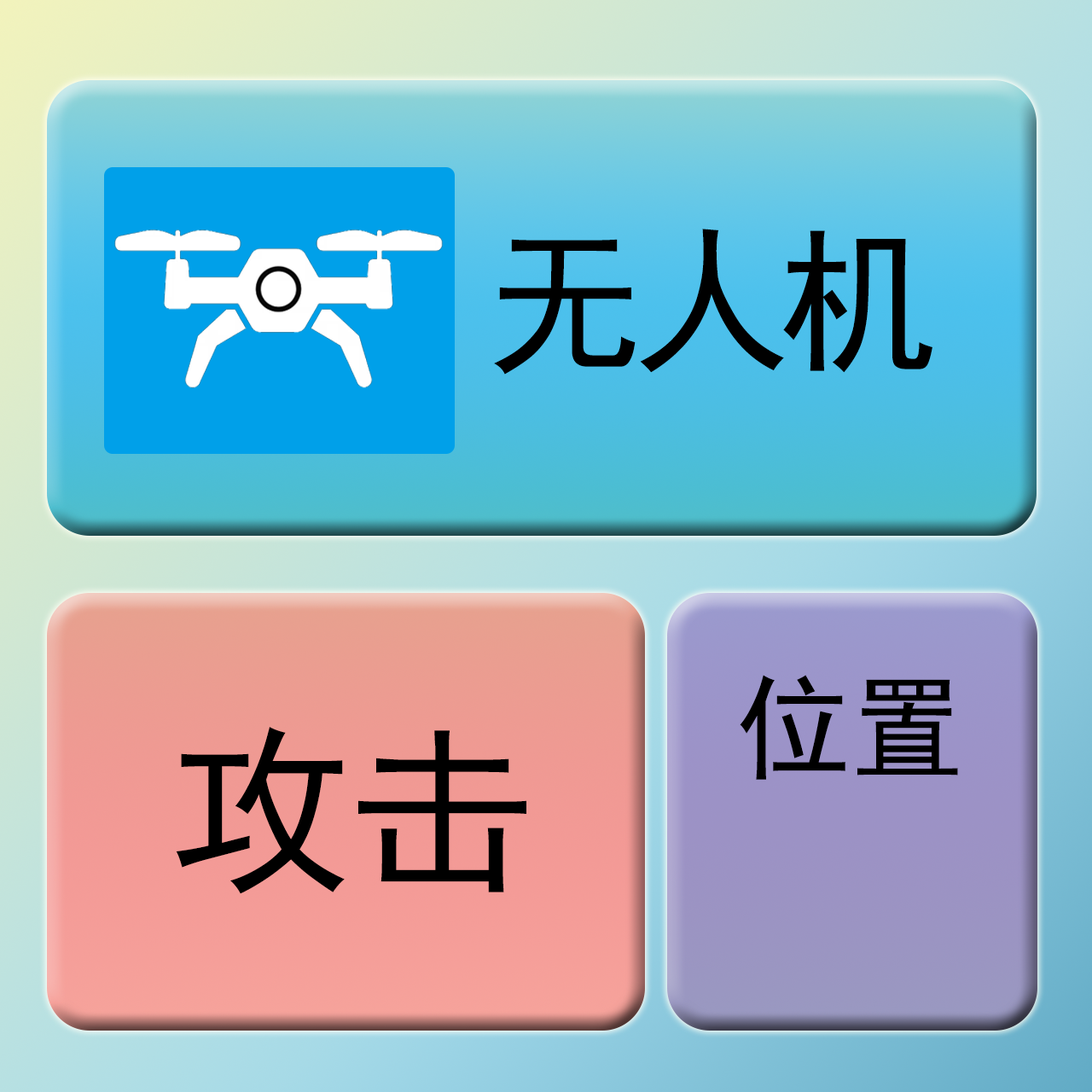
<style>
.page{position:relative;width:1092px;height:1092px}
.page>*{position:absolute;margin:0}
.t1{font:159.3px "SimHei";letter-spacing:-0.078em;color:#000000}
.t2{font:113.8px "SimHei";color:#000000}
.t3{font:182px "SimHei";color:#000000}
</style>
<div class="page">
<p class="t1" style="left:494px;top:229px;width:438px;height:146px">无人机</p>
<p class="t2" style="left:740px;top:675px;width:218px;height:105px">位置</p>
<p class="t3" style="left:176px;top:727px;width:350px;height:167px">攻击</p>
</div>
